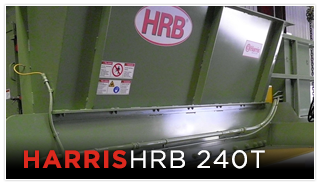
<style>
.page{position:relative;width:320px;height:185px}
.page>*{position:absolute;margin:0}
.t1{font:25px "GothamBook";letter-spacing:0.05em;color:#ffffff;text-transform:uppercase}
.t2{font:25px "GothamBold";letter-spacing:0.05em;color:#dc291e;text-transform:uppercase}
</style>
<div class="page">
<p class="t1" style="left:24px;top:150px;width:241px;height:19px"><span class="t2">Harris</span>HRB 240T</p>
</div>
